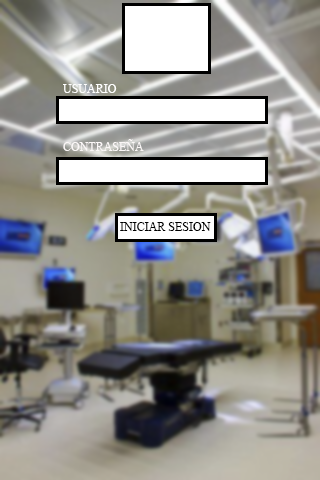
<style>
.page{position:relative;width:320px;height:480px}
.page>*{position:absolute;margin:0}
.t1{font:12px "MyriadPro-Regular";color:#ffffff}
.t2{font:12px "MyriadPro-Regular";color:#fbf7f7}
.t3{font:12px "MyriadPro-Regular";color:#000000}
</style>
<div class="page">
<p class="t1" style="left:63px;top:84px;width:54px;height:9px">USUARIO</p>
<p class="t2" style="left:63px;top:139px;width:81px;height:12px">CONTRASEÑA</p>
<p class="t3" style="left:120px;top:222px;width:91px;height:9px">INICIAR SESION</p>
</div>
